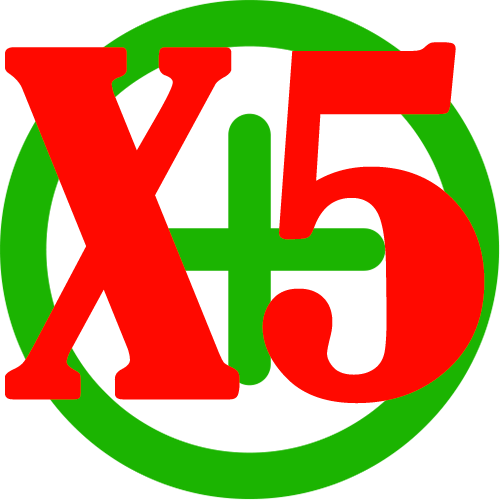
<style>
.page{position:relative;width:500px;height:500px;background:#ffffff}
.page>*{position:absolute;margin:0}
.t1{font:446.6px "BernardMT-Condensed";color:#ff0900;scale:1.16 1}
</style>
<div class="page">
<p class="t1" style="left:5px;top:42px;width:480px;height:362px">X5</p>
</div>
